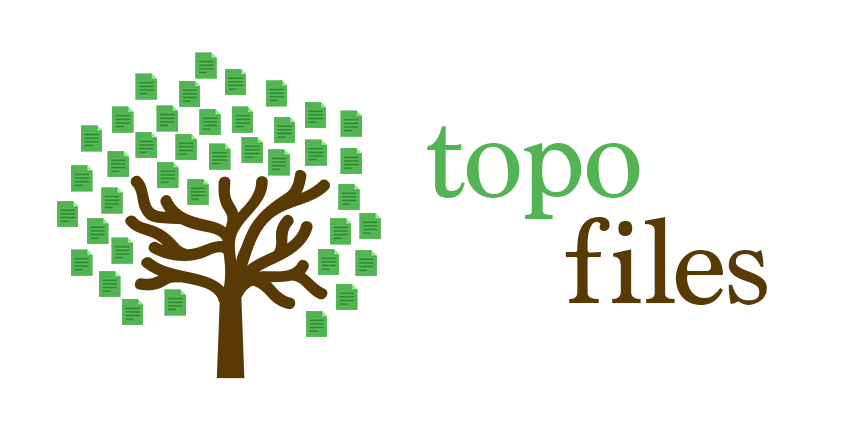
<style>
.page{position:relative;width:860px;height:445px;background:#ffffff}
.page>*{position:absolute;margin:0}
.t1{font:124.5px "Marion-Regular";color:#53b453}
.t2{font:124.5px "Marion-Regular";color:#593a05}
.t3{font:124.5px "Marion-Regular";letter-spacing:0.05em;color:#593a05}
</style>
<div class="page">
<p class="t1" style="left:427px;top:126px;width:213px;height:93px">topo</p>
<p class="t2" style="left:565px;top:217px;width:202px;height:88px"><span class="t3">f</span>iles</p>
</div>
